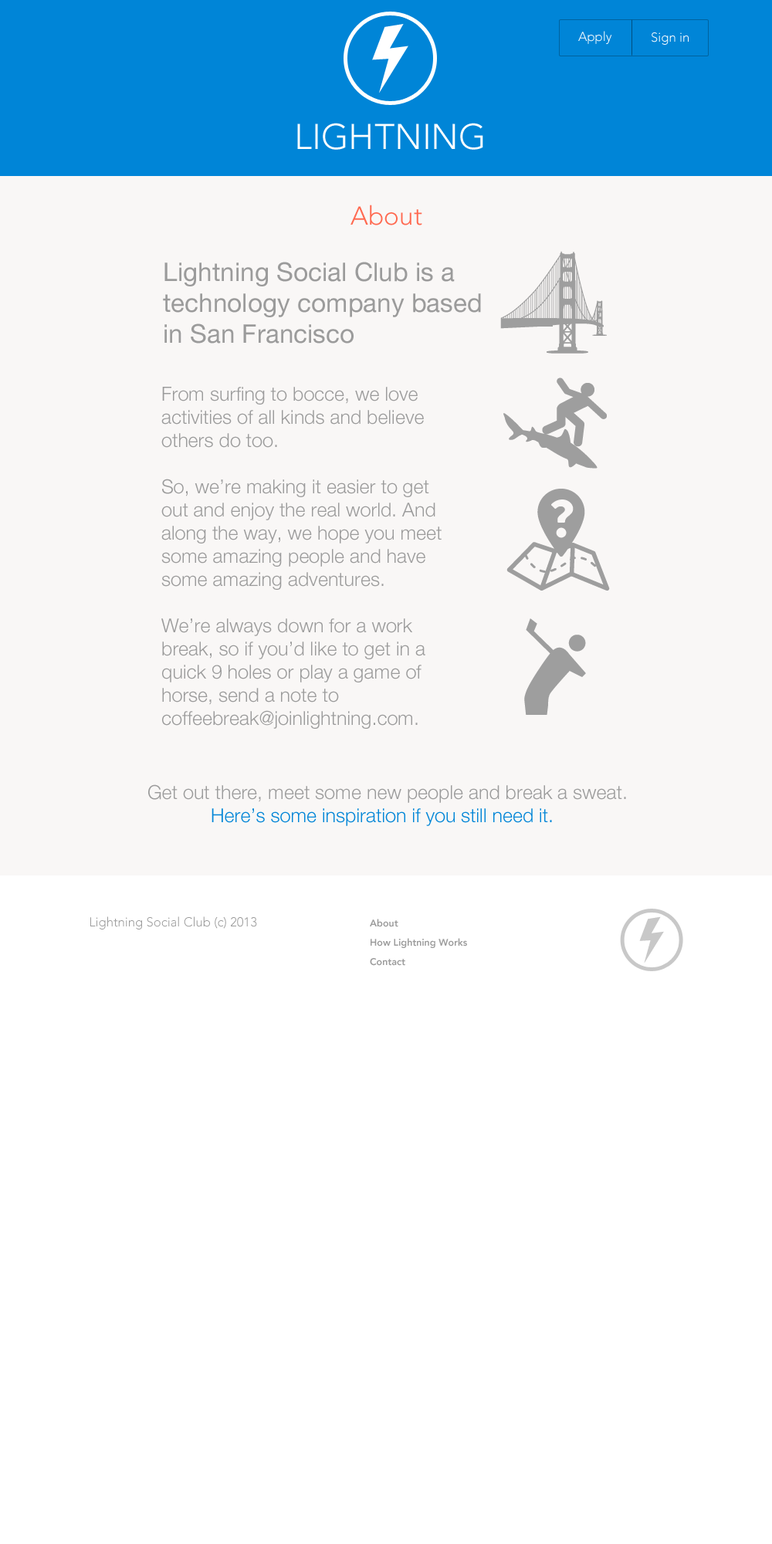
<style>
.page{position:relative;width:772px;height:1544px;background:#ffffff}
.page>*{position:absolute;margin:0}
.t1{font:12.9px "AvenirLTPro-Light";color:#ffffff}
.t2{font:35.4px "AvenirLTPro-Light";color:#ffffff;text-transform:uppercase}
.t3{font:25.7px "AvenirLTPro-Light";color:#ff6950}
.t4{font:25.7px "HelveticaNeue";color:#9b9b9b}
.t5{font:19.3px "HelveticaNeue-Light";color:#9b9b9b}
.t6{font:19.3px "HelveticaNeue-Light";color:#0085d7}
.t7{font:12.9px "AvenirLTPro-Light";color:#9b9b9b}
.t8{font:9.7px/19.3px "AvenirLTPro-Heavy";color:#9b9b9b}
</style>
<div class="page">
<p class="t1" style="left:578px;top:31px;width:34px;height:13px">Apply</p>
<p class="t1" style="left:652px;top:32px;width:37px;height:13px">Sign in</p>
<p class="t2" style="left:297px;top:123px;width:186px;height:27px">Lightning</p>
<p class="t3" style="left:351px;top:205px;width:71px;height:20px">About</p>
<p class="t4" style="left:163px;top:262px;width:318px;height:82px">Lightning Social Club is a <br>technology company based <br>in San Francisco</p>
<p class="t5" style="left:161px;top:387px;width:281px;height:342px">From surfing to bocce, we love <br>activities of all kinds and believe <br>others do too. <br><br>So, we’re making it easier to get <br>out and enjoy the real world. And <br>along the way, we hope you meet <br>some amazing people and have <br>some amazing adventures.<br><br>We’re always down for a work <br>break, so if you’d like to get in a <br>quick 9 holes or play a game of <br>horse, send a note to <br>coffeebreak@joinlightning.com.</p>
<p class="t5" style="left:148px;top:785px;width:478px;height:41px;text-align:center">Get out there, meet some new people and break a sweat.<br><span class="t6">Here’s some inspiration if you still need it.</span></p>
<p class="t7" style="left:90px;top:917px;width:167px;height:13px">Lightning Social Club (c) 2013</p>
<p class="t8" style="left:370px;top:919px;width:97px;height:47px">About<br>How Lightning Works<br>Contact</p>
</div>
